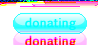
<style>
.page{position:relative;width:98px;height:45px;background:#ffffff}
.page>*{position:absolute;margin:0}
.t1{font:12px "EuphemiaUCAS";font-weight:bold}
</style>
<div class="page">
<p class="t1" style="left:25px;top:16px;width:51px;height:13px">donating</p>
</div>
